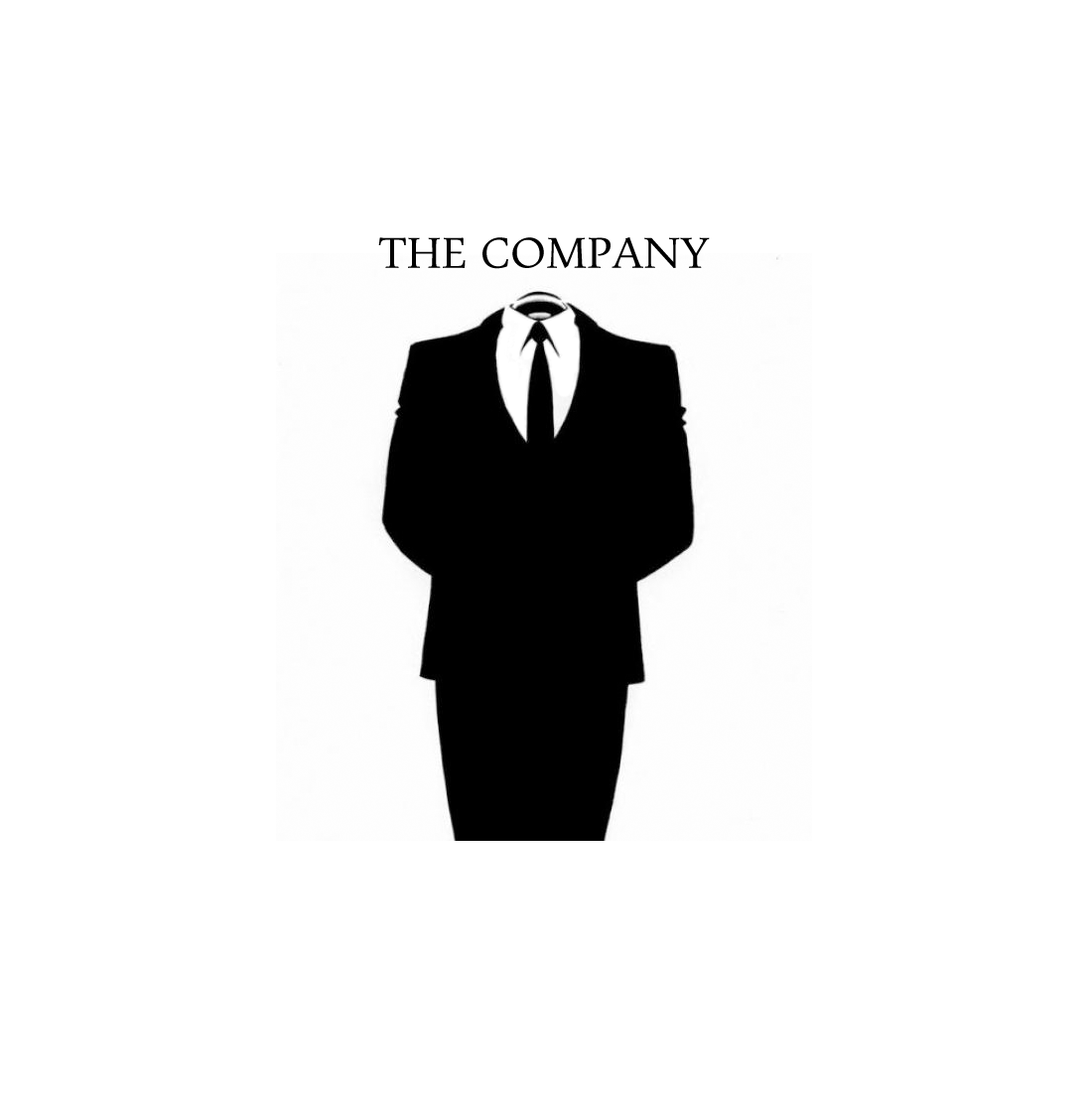
<style>
.page{position:relative;width:1089px;height:1095px;background:#ffffff}
.page>*{position:absolute;margin:0}
.t1{font:45.7px "Pescadero";color:#000000}
</style>
<div class="page">
<p class="t1" style="left:378px;top:237px;width:332px;height:32px">THE COMPANY</p>
</div>
